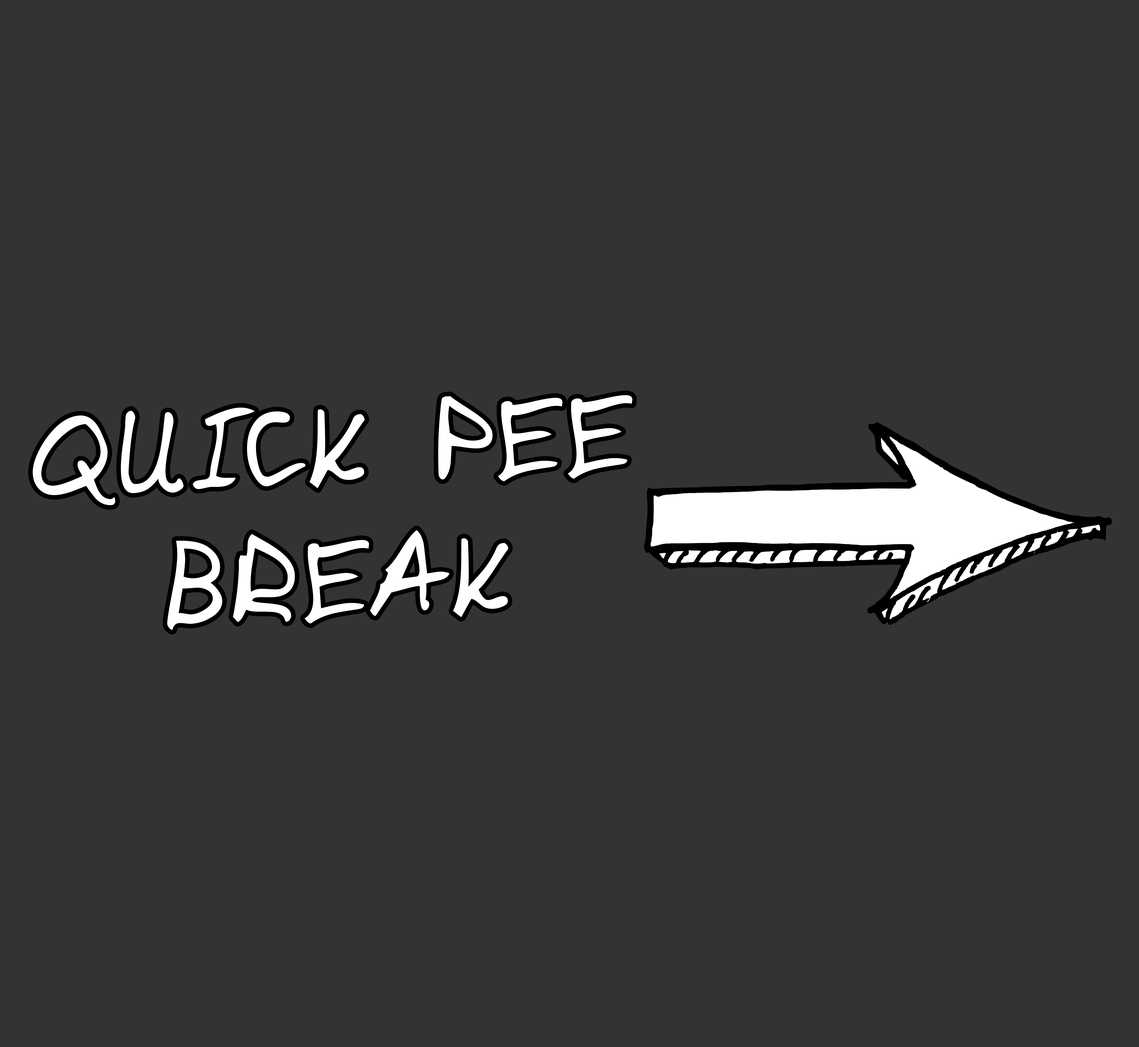
<style>
.page{position:relative;width:1139px;height:1047px;background:#333333}
.page>*{position:absolute;margin:0}
.t1{font:112px "DomesticManners";letter-spacing:0.04em;color:#ffffff}
</style>
<div class="page">
<p class="t1" style="left:33px;top:395px;width:599px;height:235px;text-align:center;rotate:-2deg">QUICK PEE<br>BREAK</p>
</div>
